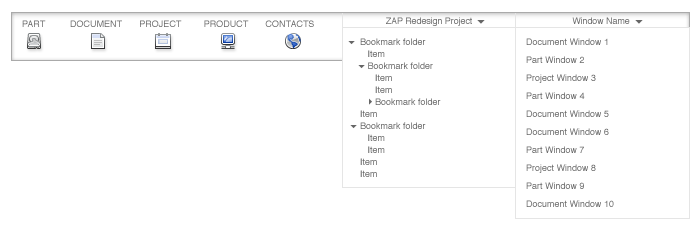
<style>
.page{position:relative;width:700px;height:236px;background:#ffffff}
.page>*{position:absolute;margin:0}
.t1{font:9px "Helvetica";letter-spacing:-0.01em;color:#666666}
.t2{font:9px "Helvetica";color:#666666}
.t3{font:9px/12px "Helvetica";color:#666666}
.t4{font:9px/18px "Helvetica";color:#666666}
</style>
<div class="page">
<p class="t1" style="left:386px;top:17px;width:86px;height:9px">ZAP Redesign Project</p>
<p class="t1" style="left:572px;top:17px;width:58px;height:7px">Window Name</p>
<p class="t2" style="left:22px;top:20px;width:292px;height:7px">PART          DOCUMENT       PROJECT         PRODUCT       CONTACTS</p>
<p class="t3" style="left:360px;top:38px;width:81px;height:139px">Bookmark folder<br>   Item<br>   Bookmark folder<br>      Item<br>      Item<br>      Bookmark folder <br>Item<br>Bookmark folder<br>   Item<br>   Item<br>Item<br>Item</p>
<p class="t4" style="left:526px;top:38px;width:88px;height:169px">Document Window 1<br>Part Window 2<br>Project Window 3<br>Part Window 4<br>Document Window 5<br>Document Window 6<br>Part Window 7<br>Project Window 8<br>Part Window 9<br>Document Window 10</p>
</div>
